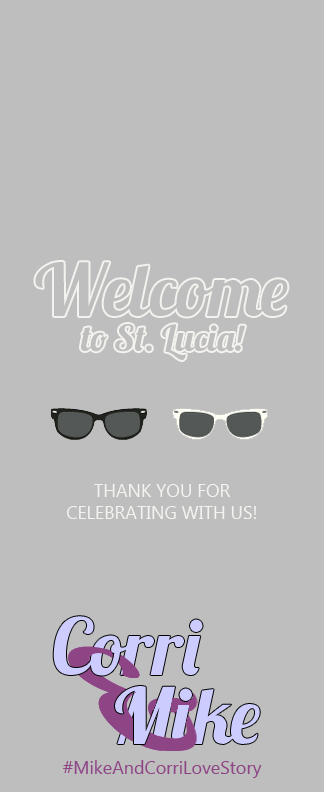
<style>
.page{position:relative;width:324px;height:792px;background:#bebebe}
.page>*{position:absolute;margin:0}
.t1{font:72px "Lobster1.3";color:#bebebe}
.t2{font:18px "LaoUI";color:#f4f3ef}
.t3{font:18px "LaoUI";color:#8e4585}
</style>
<div class="page">
<p class="t1" style="left:35px;top:262px;width:253px;height:55px">Welcome</p>
<p class="t2" style="left:67px;top:484px;width:189px;height:35px;text-align:center">THANK YOU FOR <br>CELEBRATING WITH US!</p>
<p class="t3" style="left:63px;top:760px;width:199px;height:18px">#MikeAndCorriLoveStory</p>
</div>
